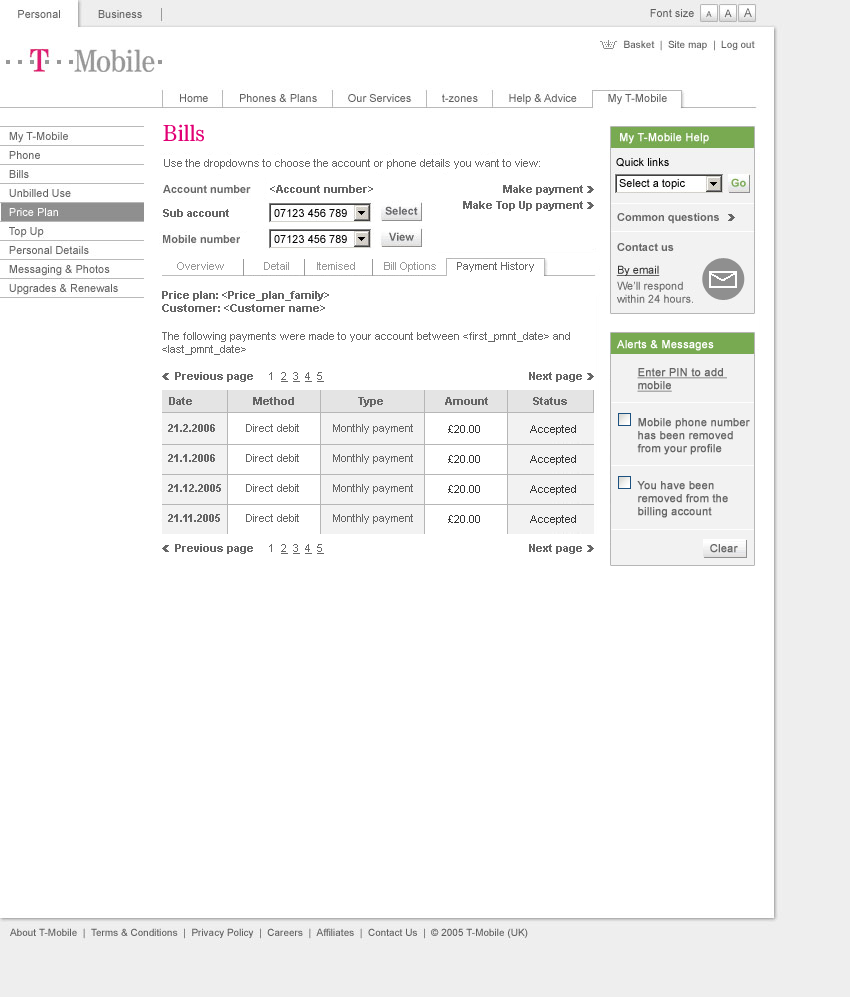
<style>
.page{position:relative;width:850px;height:997px;background:#ffffff}
.page>*{position:absolute;margin:0}
.t1{font:24px "Tele-Antiqua";color:#e20074}
.t2{font:11px "ArialMT";color:#666666}
.t3{font:11px "Arial-BoldMT";color:#666666}
.t4{font:11px "ArialMT";color:#999999}
.t5{font:11px "ArialMT";color:#ffffff;font-weight:bold}
.t6{font:11px "ArialMT";color:#666666;text-decoration:underline}
.t7{font:11px "ArialMT";color:#666666;font-weight:bold;text-decoration:underline}
.t8{font:11px "ArialMT";color:#333333}
.t9{font:11px "ArialMT";color:#666666;font-weight:bold}
</style>
<div class="page">
<p class="t1" style="left:163px;top:124px;width:41px;height:18px">Bills</p>
<p class="t2" style="left:164px;top:159px;width:376px;height:10px">Use the dropdowns to choose the account or phone details you want to view:</p>
<p class="t3" style="left:270px;top:185px;width:103px;height:8px">&lt;Account number&gt;</p>
<p class="t3" style="left:503px;top:185px;width:80px;height:10px">Make payment</p>
<p class="t3" style="left:163px;top:209px;width:66px;height:8px">Sub account</p>
<p class="t3" style="left:463px;top:201px;width:120px;height:10px">Make Top Up payment</p>
<p class="t4" style="left:177px;top:262px;width:47px;height:8px">Overview</p>
<p class="t4" style="left:264px;top:262px;width:25px;height:8px">Detail</p>
<p class="t4" style="left:317px;top:262px;width:38px;height:8px">Itemised</p>
<p class="t4" style="left:384px;top:262px;width:52px;height:10px">Bill Options</p>
<p class="t2" style="left:457px;top:262px;width:77px;height:10px">Payment History</p>
<p class="t3" style="left:162px;top:291px;width:167px;height:21px">Price plan: &lt;Price_plan_family&gt;<br>Customer: &lt;Customer name&gt;</p>
<p class="t2" style="left:162px;top:332px;width:408px;height:23px">The following payments were made to your account between &lt;first_pmnt_date&gt; and &lt;last_pmnt_date&gt;</p>
<p class="t5" style="left:617px;top:340px;width:97px;height:11px">Alerts &amp; Messages</p>
<p class="t3" style="left:175px;top:372px;width:78px;height:10px">Previous page</p>
<p class="t6" style="left:269px;top:372px;width:55px;height:10px"><span class="t2">1  </span>2  3  4  5</p>
<p class="t3" style="left:529px;top:372px;width:53px;height:10px">Next page</p>
<p class="t7" style="left:637px;top:368px;width:90px;height:24px">Enter PIN to add <br>mobile</p>
<p class="t3" style="left:169px;top:397px;width:23px;height:8px">Date</p>
<p class="t3" style="left:253px;top:397px;width:41px;height:8px">Method</p>
<p class="t3" style="left:358px;top:397px;width:25px;height:10px">Type</p>
<p class="t3" style="left:445px;top:397px;width:43px;height:8px">Amount</p>
<p class="t3" style="left:533px;top:397px;width:34px;height:8px">Status</p>
<p class="t3" style="left:168px;top:424px;width:47px;height:8px">21.2.2006</p>
<p class="t2" style="left:246px;top:424px;width:53px;height:8px">Direct debit</p>
<p class="t2" style="left:333px;top:424px;width:80px;height:10px">Monthly payment</p>
<p class="t8" style="left:448px;top:425px;width:32px;height:8px">£20.00</p>
<p class="t8" style="left:530px;top:425px;width:46px;height:10px">Accepted</p>
<p class="t9" style="left:637px;top:418px;width:113px;height:37px">Mobile phone number <br>has been removed <br>from your profile</p>
<p class="t3" style="left:168px;top:454px;width:47px;height:8px">21.1.2006</p>
<p class="t2" style="left:246px;top:454px;width:53px;height:8px">Direct debit</p>
<p class="t2" style="left:333px;top:454px;width:80px;height:10px">Monthly payment</p>
<p class="t8" style="left:448px;top:455px;width:32px;height:8px">£20.00</p>
<p class="t8" style="left:530px;top:455px;width:46px;height:10px">Accepted</p>
<p class="t3" style="left:168px;top:484px;width:53px;height:8px">21.12.2005</p>
<p class="t2" style="left:246px;top:484px;width:53px;height:8px">Direct debit</p>
<p class="t2" style="left:333px;top:484px;width:80px;height:10px">Monthly payment</p>
<p class="t8" style="left:448px;top:485px;width:32px;height:8px">£20.00</p>
<p class="t8" style="left:530px;top:485px;width:46px;height:10px">Accepted</p>
<p class="t9" style="left:637px;top:481px;width:91px;height:37px">You have been <br>removed from the <br>billing account</p>
<p class="t3" style="left:168px;top:514px;width:52px;height:8px">21.11.2005</p>
<p class="t2" style="left:246px;top:514px;width:53px;height:8px">Direct debit</p>
<p class="t2" style="left:333px;top:514px;width:80px;height:10px">Monthly payment</p>
<p class="t8" style="left:448px;top:515px;width:32px;height:8px">£20.00</p>
<p class="t8" style="left:530px;top:515px;width:46px;height:10px">Accepted</p>
<p class="t3" style="left:175px;top:544px;width:78px;height:10px">Previous page</p>
<p class="t6" style="left:269px;top:544px;width:55px;height:10px"><span class="t2">1  </span>2  3  4  5</p>
<p class="t3" style="left:529px;top:544px;width:53px;height:10px">Next page</p>
<p class="t9" style="left:710px;top:544px;width:28px;height:9px">Clear</p>
</div>
